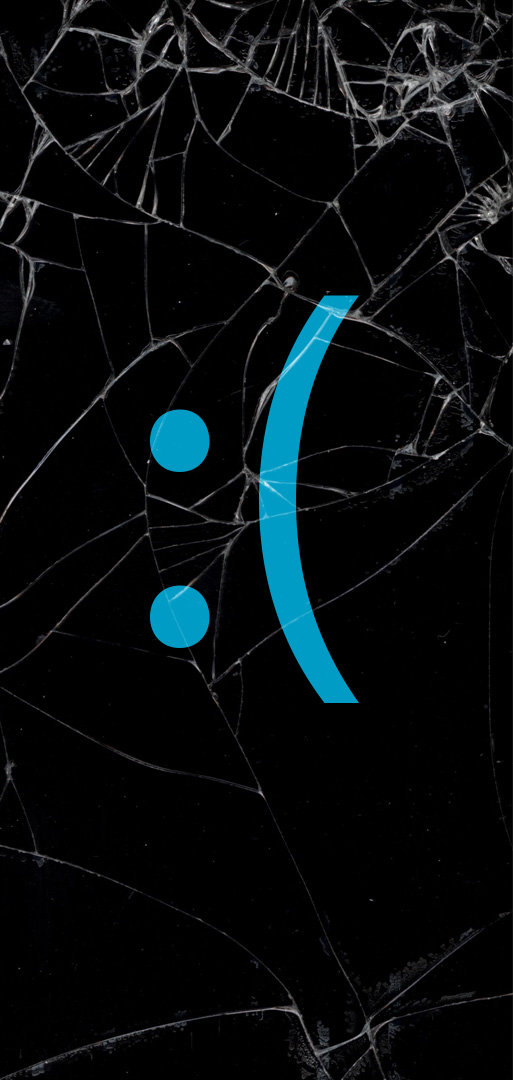
<style>
.page{position:relative;width:513px;height:1080px;background:#000000}
.page>*{position:absolute;margin:0}
.t1{font:500px "MyriadPro-Regular";color:#009cc5}
</style>
<div class="page">
<p class="t1" style="left:150px;top:295px;width:209px;height:408px">:(</p>
</div>
